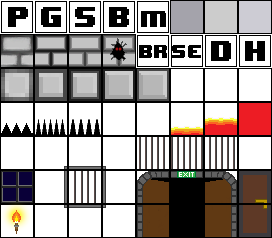
<style>
.page{position:relative;width:272px;height:238px;background:#ffffff}
.page>*{position:absolute;margin:0}
.t1{font:24px "8BITWONDERNominal";color:#000000}
.t2{font:18.7px "8BITWONDERNominal";color:#000000}
.t3{font:16px "8BITWONDERNominal";color:#000000}
.t4{font:12px "8BITWONDERNominal";color:#000000}
</style>
<div class="page">
<p class="t1" style="left:8px;top:7px;width:20px;height:20px">P</p>
<p class="t1" style="left:41px;top:7px;width:20px;height:20px">G</p>
<p class="t1" style="left:75px;top:7px;width:20px;height:20px">S</p>
<p class="t1" style="left:109px;top:7px;width:20px;height:20px">B</p>
<p class="t2" style="left:141px;top:11px;width:25px;height:16px">M</p>
<p class="t1" style="left:211px;top:41px;width:20px;height:20px">D</p>
<p class="t1" style="left:245px;top:41px;width:20px;height:20px">H</p>
<p class="t3" style="left:139px;top:45px;width:28px;height:13px;rotate:-1deg">Br</p>
<p class="t4" style="left:172px;top:45px;width:29px;height:13px">SE</p>
</div>
